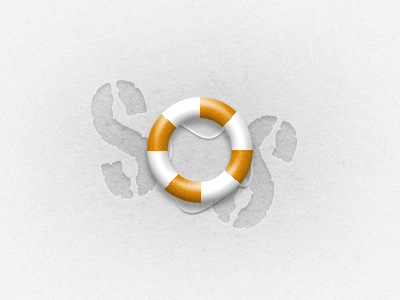
<style>
.page{position:relative;width:400px;height:300px}
.page>*{position:absolute;margin:0}
.t1{font:160px "PortagoITCTT";color:#c6c6c6}
.t2{font:160px "PortagoITCTT";color:#c5c4c4}
</style>
<div class="page">
<p class="t1" style="left:91px;top:80px;width:69px;height:119px;rotate:-12deg">S</p>
<p class="t2" style="left:212px;top:115px;width:85px;height:114px;rotate:26deg">S</p>
</div>
